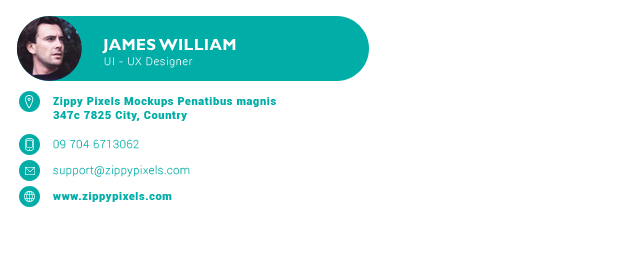
<style>
.page{position:relative;width:620px;height:259px;background:#ffffff}
.page>*{position:absolute;margin:0}
.t1{font:16px "GillSansMT-Bold";letter-spacing:0.02em;color:#ffffff;text-transform:uppercase}
.t2{font:10.4px "Roboto-Thin";letter-spacing:0.08em;color:#ffffff}
.t3{font:11px/14px "Roboto-Black";letter-spacing:0.06em;color:#00ada7}
.t4{font:11px/13px "Roboto-Thin";letter-spacing:0.06em;color:#00ada7}
.t5{font:11px/13px "Roboto-Black";letter-spacing:0.06em;color:#00ada7}
</style>
<div class="page">
<p class="t1" style="left:102px;top:39px;width:134px;height:15px">JAMES WILLIAM</p>
<p class="t2" style="left:104px;top:56px;width:89px;height:12px">UI - UX Designer</p>
<p class="t3" style="left:53px;top:97px;width:223px;height:24px">Zippy Pixels Mockups Penatibus magnis<br>347c 7825 City, Country</p>
<p class="t4" style="left:53px;top:139px;width:137px;height:63px">09 704 6713062<br><br>support@zippypixels.com<br><span class="t5"><br>www.zippypixels.com</span></p>
</div>
